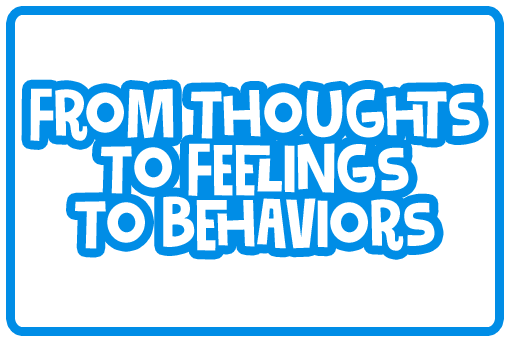
<style>
.page{position:relative;width:509px;height:341px;background:#ffffff}
.page>*{position:absolute;margin:0}
.t1{font:64px/55px "Gumbutcha";color:#ffffff;scale:0.92 1}
</style>
<div class="page">
<p class="t1" style="left:30px;top:88px;width:450px;height:163px;text-align:center">From Thoughts<br>To Feelings<br>To Behaviors</p>
</div>
